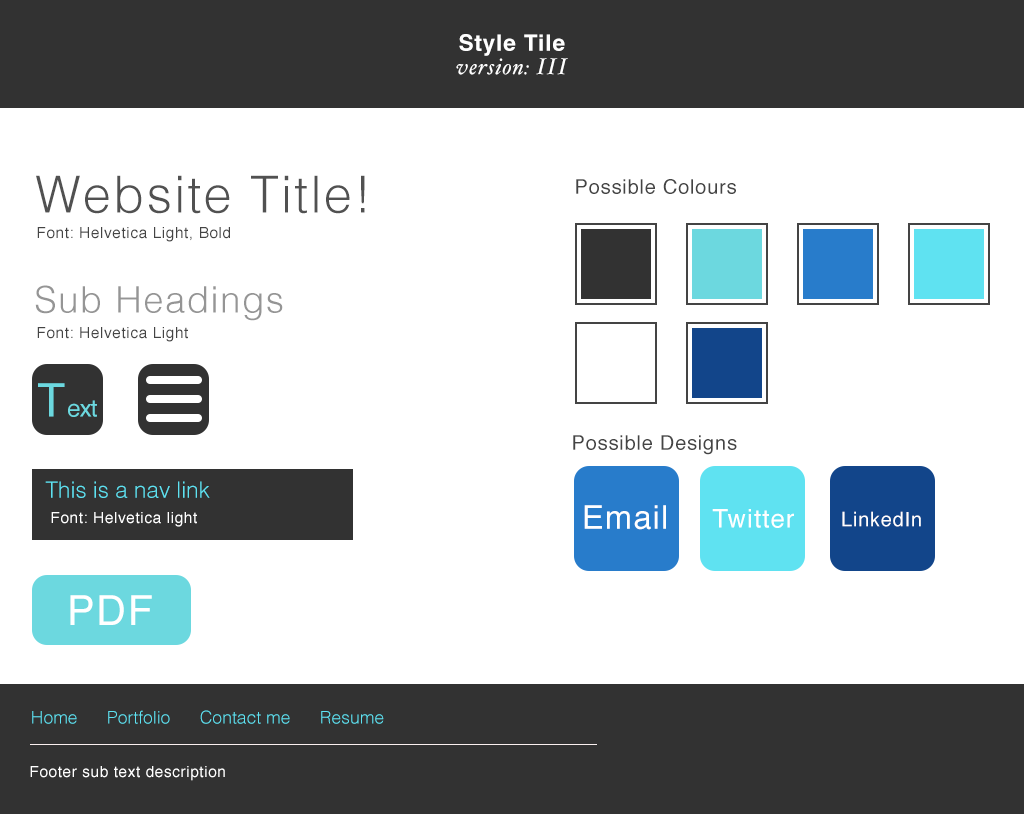
<style>
.page{position:relative;width:1024px;height:814px;background:#ffffff}
.page>*{position:absolute;margin:0}
.t1{font:22.5px/23.2px "HoeflerText-Italic";letter-spacing:0.04em;color:#ffffff}
.t2{font:22.5px/23.2px "Helvetica-Bold";letter-spacing:0.04em;color:#ffffff}
.t3{font:51.1px "Helvetica-Light";letter-spacing:0.04em;color:#515151}
.t4{font:20px "Helvetica";letter-spacing:0.04em;color:#444444}
.t5{font:15.3px "Helvetica";letter-spacing:0.04em;color:#444444}
.t6{font:36.6px "Helvetica-Light";letter-spacing:0.04em;color:#959595}
.t7{font:24px "Helvetica";letter-spacing:-0.04em;color:#6cd8df}
.t8{font:46px "Helvetica";letter-spacing:0.04em;color:#6cd8df}
.t9{font:22.4px "Helvetica-Light";color:#5fe2f1}
.t10{font:32.5px "Helvetica";letter-spacing:0.04em;color:#ffffff}
.t11{font:25.8px "Helvetica";letter-spacing:0.04em;color:#ffffff}
.t12{font:15.3px "Helvetica";letter-spacing:0.04em;color:#ffffff}
.t13{font:20px "Helvetica";letter-spacing:0.04em;color:#ffffff}
.t14{font:41.4px "Helvetica";letter-spacing:0.04em;color:#ffffff}
.t15{font:17.6px "Helvetica-Light";color:#5fe2f1}
</style>
<div class="page">
<p class="t1" style="left:456px;top:34px;width:112px;height:41px;text-align:center"><span class="t2">Style Tile<br></span>version: III</p>
<p class="t3" style="left:36px;top:175px;width:329px;height:39px">Website Title!</p>
<p class="t4" style="left:576px;top:179px;width:160px;height:15px">Possible Colours</p>
<p class="t5" style="left:37px;top:227px;width:193px;height:15px">Font: Helvetica Light, Bold</p>
<p class="t6" style="left:35px;top:285px;width:248px;height:36px">Sub Headings</p>
<p class="t5" style="left:37px;top:327px;width:151px;height:15px">Font: Helvetica Light</p>
<p class="t7" style="left:38px;top:383px;width:59px;height:34px"><span class="t8">T</span>ext</p>
<p class="t4" style="left:573px;top:435px;width:164px;height:20px">Possible Designs</p>
<p class="t9" style="left:45px;top:481px;width:165px;height:17px">This is a nav link</p>
<p class="t10" style="left:584px;top:505px;width:82px;height:25px">Email</p>
<p class="t11" style="left:712px;top:509px;width:82px;height:19px">Twitter</p>
<p class="t12" style="left:51px;top:512px;width:146px;height:15px">Font: Helvetica light</p>
<p class="t13" style="left:842px;top:511px;width:79px;height:16px">LinkedIn</p>
<p class="t14" style="left:70px;top:595px;width:82px;height:30px">PDF</p>
<p class="t15" style="left:32px;top:710px;width:352px;height:14px">Home      Portfolio      Contact me      Resume</p>
<p class="t12" style="left:30px;top:766px;width:195px;height:15px">Footer sub text description</p>
</div>
